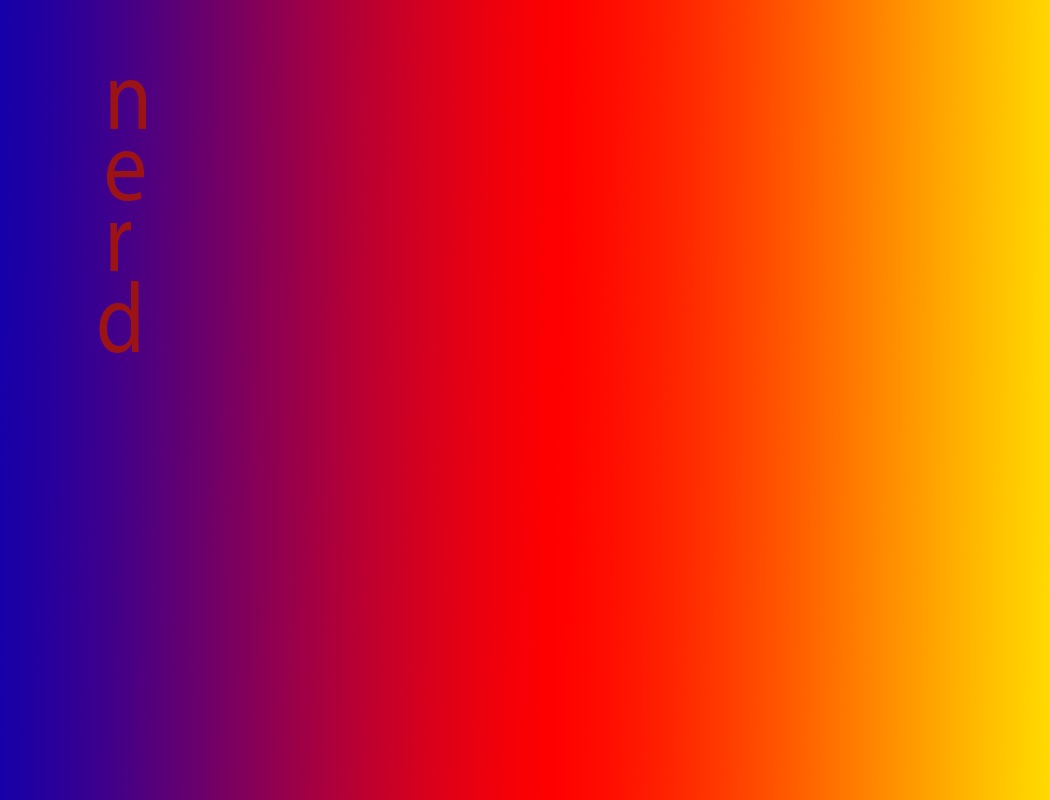
<style>
.page{position:relative;width:1050px;height:800px}
.page>*{position:absolute;margin:0}
.t1{font:100px "MyriadPro-Regular";color:#9b1313;scale:0.86 1}
</style>
<div class="page">
<p class="t1" style="left:110px;top:80px;width:36px;height:49px">n</p>
<p class="t1" style="left:107px;top:151px;width:37px;height:50px">e</p>
<p class="t1" style="left:110px;top:222px;width:21px;height:49px">r</p>
<p class="t1" style="left:99px;top:281px;width:40px;height:72px">d</p>
</div>
